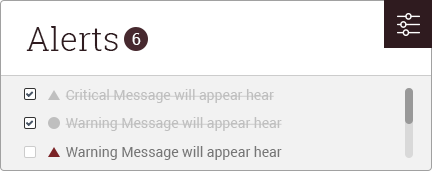
<style>
.page{position:relative;width:432px;height:171px;background:#f2f2f2}
.page>*{position:absolute;margin:0}
.t1{font:33px "RobotoSlab-Light";color:#2f1b1f}
.t2{font:16.4px "Roboto-Regular";color:#ffffff}
.t3{font:14px "Roboto-Regular";color:#bfbfbf}
.t4{font:14px "Roboto-Regular";color:#767676}
</style>
<div class="page">
<p class="t1" style="left:26px;top:26px;width:92px;height:25px">Alerts</p>
<p class="t2" style="left:132px;top:33px;width:9px;height:12px">6</p>
<p class="t3" style="left:65px;top:89px;width:209px;height:14px">Critical Message will appear hear</p>
<p class="t3" style="left:65px;top:117px;width:217px;height:14px">Warning Message will appear hear</p>
<p class="t4" style="left:66px;top:146px;width:216px;height:14px">Warning Message will appear hear</p>
</div>
